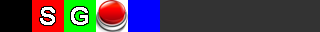
<style>
.page{position:relative;width:320px;height:32px;background:#333333}
.page>*{position:absolute;margin:0}
.t1{font:24px "ArialMT";color:#ffffff;font-weight:bold}
</style>
<div class="page">
<p class="t1" style="left:40px;top:7px;width:15px;height:18px">S</p>
<p class="t1" style="left:71px;top:7px;width:17px;height:18px">G</p>
</div>
